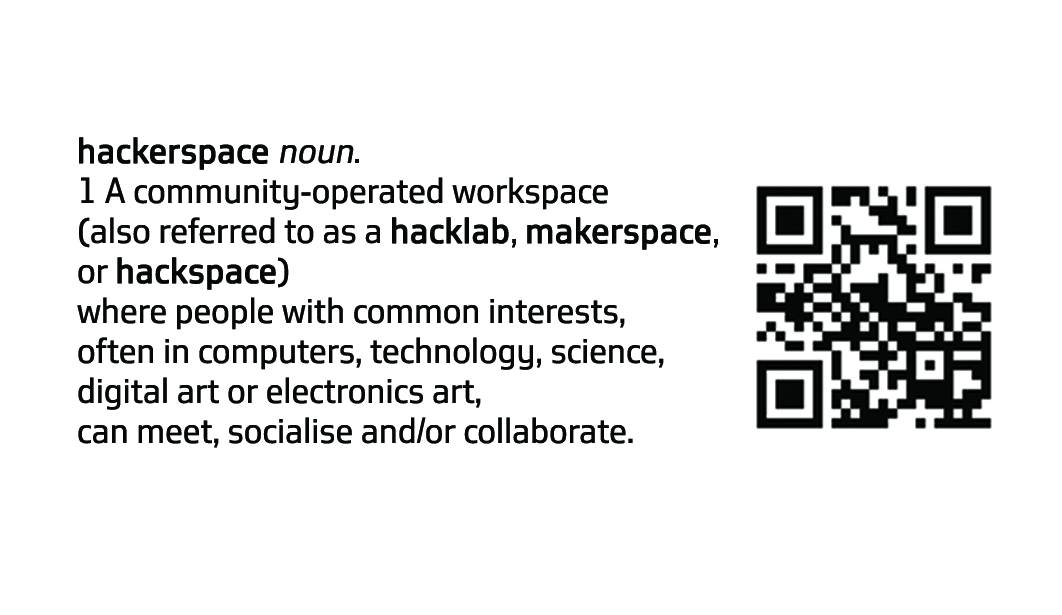
<style>
.page{position:relative;width:1062px;height:615px;background:#ffffff}
.page>*{position:absolute;margin:0}
.t1{font:33.3px "Southampton";color:#060808}
.t2{font:33.3px "Southampton";color:#060808;font-weight:bold}
.t3{font:33.3px "Southampton";color:#060808;font-style:italic}
</style>
<div class="page">
<p class="t1" style="left:77px;top:137px;width:641px;height:311px"><span class="t2">hackerspace </span><span class="t3">noun</span>. <br>1 A community-operated workspace <br>(also referred to as a <span class="t2">hacklab</span>, <span class="t2">makerspace</span>, <br>or <span class="t2">hackspace</span>) <br>where people with common interests, <br>often in computers, technology, science, <br>digital art or electronics art, <br>can meet, socialise and/or collaborate.</p>
</div>
